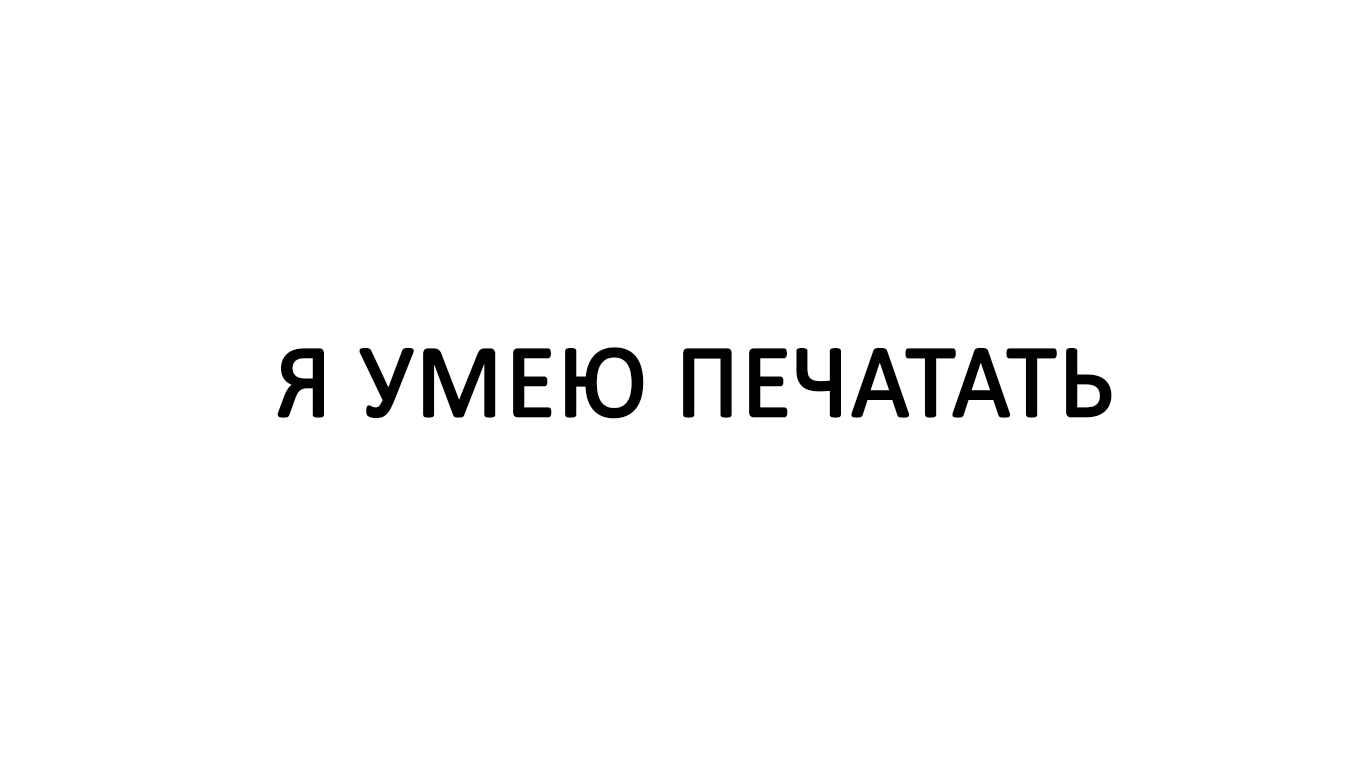
<style>
.page{position:relative;width:1366px;height:768px;background:#ffffff}
.page>*{position:absolute;margin:0}
.t1{font:104.9px "Calibri";color:#000000;font-weight:bold;scale:0.97 1}
</style>
<div class="page">
<p class="t1" style="left:277px;top:347px;width:835px;height:72px">Я УМЕЮ ПЕЧАТАТЬ</p>
</div>
